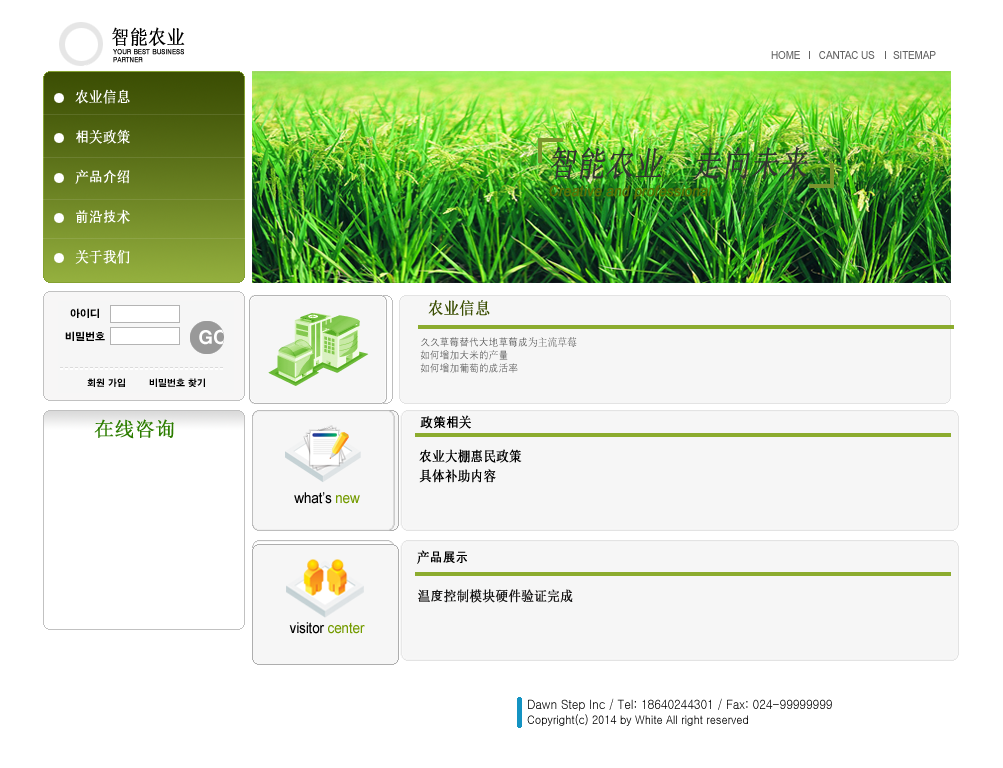
<style>
.page{position:relative;width:1003px;height:768px;background:#ffffff}
.page>*{position:absolute;margin:0}
.t1{font:20px "SimSun";color:#000000;text-transform:uppercase;font-weight:bold;scale:0.9 1}
.t2{font:7px/8px "Gulim";color:#000000;text-transform:uppercase;font-weight:bold;scale:0.9 1}
.t3{font:11px "ArialMT";letter-spacing:-0.01em;color:#636363;text-transform:uppercase;scale:0.9 1}
.t4{font:15px/20px "SimSun";color:#ffffff;font-weight:bold;scale:0.9 1}
.t5{font:15px/20px "Gulim";color:#ffffff;font-weight:bold;scale:0.9 1}
.t6{font:15px/20px "ArialMT";color:#597406;font-weight:bold;font-style:italic;scale:0.9 1}
.t7{font:35px/20px "SimSun";color:#333333;font-weight:bold;font-style:italic;scale:0.8 1}
.t8{font:17px "SimSun";letter-spacing:-0.01em;color:#3e5106;text-transform:uppercase;font-weight:bold;scale:0.9 1}
.t9{font:11px/13px "Gulim";letter-spacing:-0.01em;color:#595959;scale:0.9 1}
.t10{font:11px/13px "SimSun";letter-spacing:-0.01em;color:#595959;scale:0.9 1}
.t11{font:20px "SimSun";letter-spacing:-0.01em;color:#2c7d00;text-transform:uppercase;font-weight:bold}
.t12{font:14px "Gulim";letter-spacing:-0.01em;color:#000000;font-weight:bold;scale:0.9 1}
.t13{font:14px "SimSun";letter-spacing:-0.01em;color:#000000;font-weight:bold;scale:0.9 1}
.t14{font:15px/13px "ArialMT";letter-spacing:-0.01em;color:#000000;scale:0.9 1}
.t15{font:15px/13px "ArialMT";letter-spacing:-0.01em;color:#749b00;scale:0.9 1}
.t16{font:14px "SimSun";color:#171616;font-weight:bold;scale:0.9 1}
.t17{font:14px "Gulim";color:#171616;font-weight:bold;scale:0.9 1}
.t18{font:13px/15px "Gulim";letter-spacing:-0.01em;color:#000000;scale:0.9 1}
.t19{font:12px/15px "Gulim";letter-spacing:-0.01em;color:#000000;scale:0.9 1}
</style>
<div class="page">
<p class="t1" style="left:112px;top:27px;width:73px;height:19px">智能农业</p>
<p class="t2" style="left:113px;top:49px;width:71px;height:14px">your best business<br>partner</p>
<p class="t3" style="left:771px;top:51px;width:165px;height:8px">home       cantac us       sitemap</p>
<p class="t4" style="left:75px;top:89px;width:55px;height:175px">农业信息<br><span class="t5"><br>相</span>关政策 <br><br>产<span class="t5">品介</span>绍<span class="t5"><br><br>前沿技</span>术<br><br>关于我们</p>
<p class="t6" style="left:549px;top:147px;width:259px;height:53px"><span class="t7">智能农业  走向未来<br></span>Creative and professional</p>
<p class="t8" style="left:428px;top:300px;width:62px;height:16px">农业信息</p>
<p class="t9" style="left:420px;top:337px;width:157px;height:36px">久久草莓替代大地草莓成<span class="t10">为主流草莓</span> <br>如何增加大米的<span class="t10">产</span>量<br>如何增加葡萄的成活率</p>
<p class="t11" style="left:94px;top:419px;width:80px;height:20px">在线咨询</p>
<p class="t12" style="left:420px;top:415px;width:51px;height:14px">政策相<span class="t13">关</span></p>
<p class="t13" style="left:419px;top:449px;width:103px;height:14px">农业大棚惠民政策</p>
<p class="t13" style="left:419px;top:469px;width:77px;height:14px">具体补助内容</p>
<p class="t14" style="left:289px;top:492px;width:76px;height:142px;text-align:center">what’s <span class="t15">new<br></span><br><br><br><br><br><br><br><br><br>visitor <span class="t15">center</span></p>
<p class="t12" style="left:417px;top:550px;width:50px;height:14px"><span class="t13">产</span>品展示</p>
<p class="t16" style="left:418px;top:589px;width:155px;height:14px">温<span class="t17">度</span>控制模块硬件验证完成</p>
<p class="t18" style="left:527px;top:698px;width:305px;height:28px">Dawn Step Inc / Tel: 18640244301 / Fax: 024-99999999<br><span class="t19">Copyright(c) 2014 by White All right reserved</span></p>
</div>
